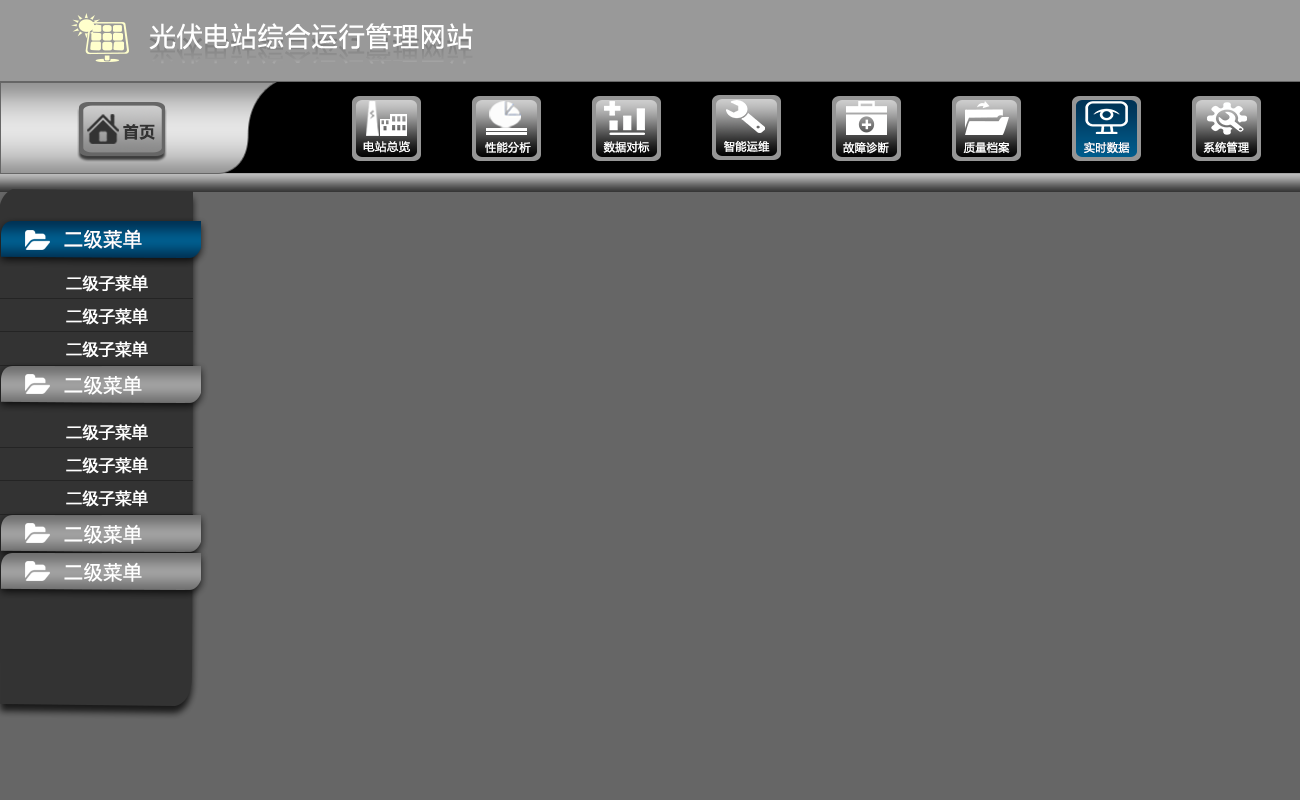
<style>
.page{position:relative;width:1300px;height:800px;background:#666666}
.page>*{position:absolute;margin:0}
.t1{font:26.4px "MicrosoftYaHei";letter-spacing:0.05em;color:#ffffff}
.t2{font:16px "MicrosoftYaHei-Bold";letter-spacing:0.05em;color:#333333}
.t3{font:11.2px "MicrosoftYaHei";letter-spacing:0.05em;color:#ffffff}
.t4{font:19.2px "MicrosoftYaHei";letter-spacing:0.05em;color:#ffffff}
.t5{font:16px "MicrosoftYaHei";color:#ffffff;font-weight:bold}
</style>
<div class="page">
<p class="t1" style="left:149px;top:23px;width:324px;height:27px">光伏电站综合运行管理网站</p>
<p class="t2" style="left:123px;top:124px;width:32px;height:16px">首页</p>
<p class="t3" style="left:363px;top:141px;width:47px;height:12px">电站总览</p>
<p class="t3" style="left:485px;top:141px;width:46px;height:12px">性能分析</p>
<p class="t3" style="left:603px;top:141px;width:47px;height:12px">数据对标</p>
<p class="t3" style="left:724px;top:140px;width:46px;height:12px">智能运维</p>
<p class="t3" style="left:843px;top:142px;width:46px;height:12px">故障诊断</p>
<p class="t3" style="left:963px;top:142px;width:47px;height:11px">质量档案</p>
<p class="t3" style="left:1084px;top:142px;width:46px;height:12px">实时数据</p>
<p class="t3" style="left:1203px;top:141px;width:46px;height:12px">系统管理</p>
<p class="t4" style="left:64px;top:229px;width:78px;height:20px">二级菜单</p>
<p class="t5" style="left:66px;top:275px;width:82px;height:17px">二级子菜单</p>
<p class="t5" style="left:66px;top:308px;width:82px;height:17px">二级子菜单</p>
<p class="t5" style="left:66px;top:341px;width:82px;height:17px">二级子菜单</p>
<p class="t4" style="left:64px;top:375px;width:78px;height:20px">二级菜单</p>
<p class="t5" style="left:66px;top:424px;width:82px;height:17px">二级子菜单</p>
<p class="t5" style="left:66px;top:457px;width:82px;height:17px">二级子菜单</p>
<p class="t5" style="left:66px;top:490px;width:82px;height:17px">二级子菜单</p>
<p class="t4" style="left:64px;top:524px;width:78px;height:20px">二级菜单</p>
<p class="t4" style="left:64px;top:562px;width:78px;height:20px">二级菜单</p>
</div>
